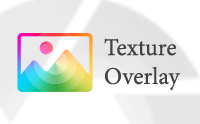
<style>
.page{position:relative;width:200px;height:124px;background:#ffffff}
.page>*{position:absolute;margin:0}
.t1{font:24px "MinionPro-Regular";color:#424242}
</style>
<div class="page">
<p class="t1" style="left:104px;top:38px;width:76px;height:53px">Texture <br>Overlay</p>
</div>
